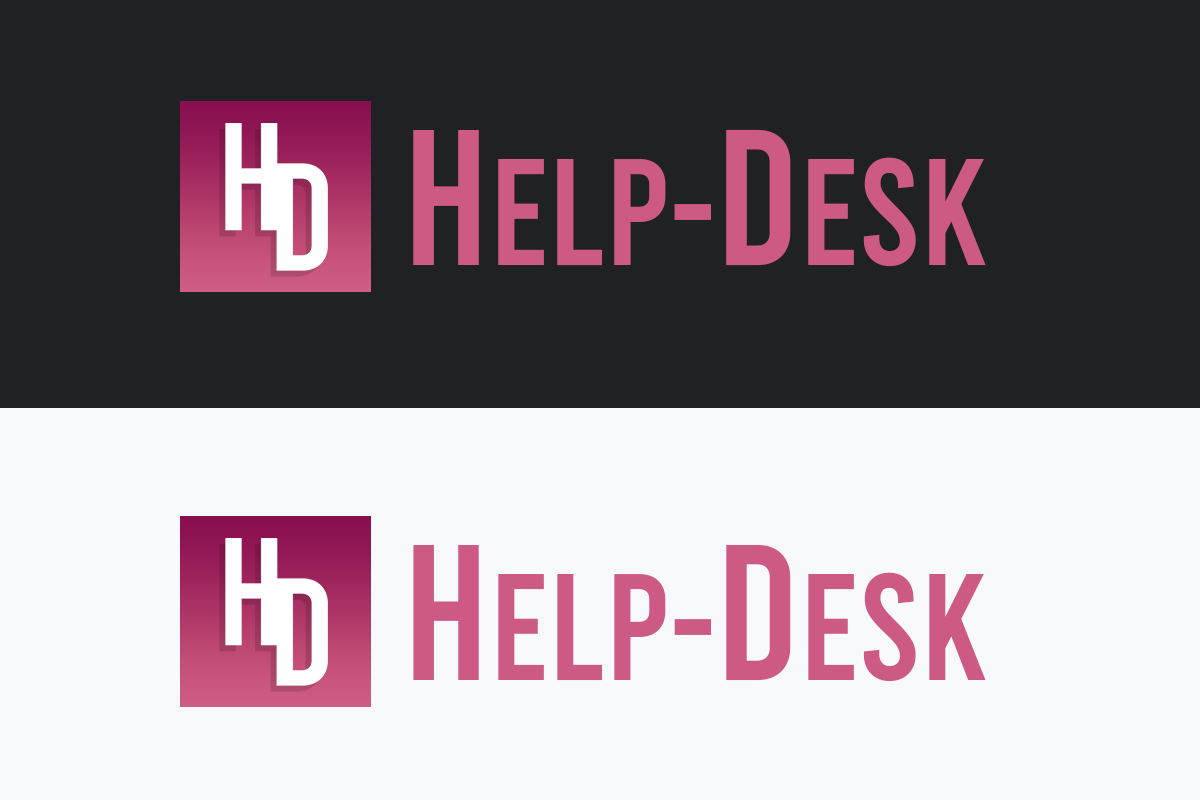
<style>
.page{position:relative;width:1200px;height:800px;background:#202124}
.page>*{position:absolute;margin:0}
.t1{font:151.4px "Bebas-Regular";color:#cc5a84}
.t2{font:193.5px "Bebas-Regular";color:#cc5a84}
</style>
<div class="page">
<p class="t1" style="left:413px;top:129px;width:573px;height:138px"><span class="t2">H</span>ELP-<span class="t2">d</span>esk</p>
<p class="t1" style="left:413px;top:544px;width:573px;height:138px"><span class="t2">H</span>ELP-<span class="t2">d</span>esk</p>
</div>
